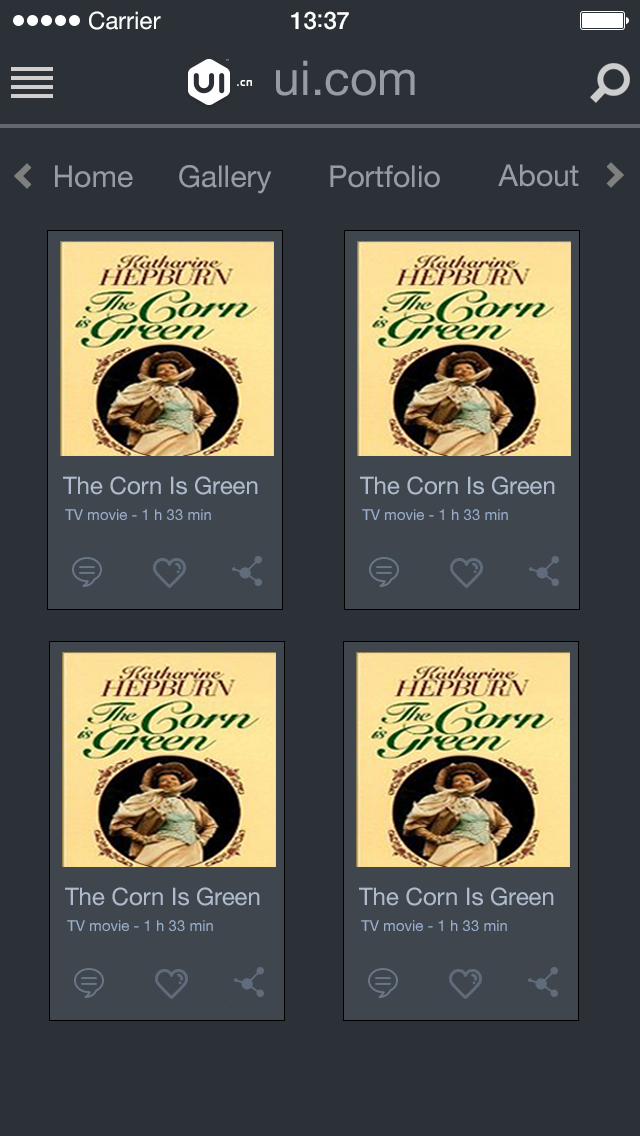
<style>
.page{position:relative;width:640px;height:1136px;background:#2c3137}
.page>*{position:absolute;margin:0}
.t1{font:24px "HelveticaNeue";color:#ffffff}
.t2{font:24px "HelveticaNeue-Medium";color:#ffffff}
.t3{font:48px "HelveticaNeue";color:#969ca4}
.t4{font:30px "HelveticaNeue";color:#969ca4}
.t5{font:24px "HelveticaNeue";color:#aebbcc}
.t6{font:15px "HelveticaNeue";color:#98aecb}
</style>
<div class="page">
<p class="t1" style="left:89px;top:11px;width:72px;height:19px">Carrier</p>
<p class="t2" style="left:291px;top:11px;width:58px;height:19px">13<span class="t1">:</span>37</p>
<p class="t3" style="left:276px;top:60px;width:139px;height:36px">ui.com</p>
<p class="t4" style="left:55px;top:165px;width:78px;height:23px">Home</p>
<p class="t4" style="left:179px;top:165px;width:93px;height:29px">Gallery</p>
<p class="t4" style="left:330px;top:165px;width:110px;height:23px">Portfolio</p>
<p class="t4" style="left:498px;top:164px;width:81px;height:23px">About</p>
<p class="t5" style="left:63px;top:476px;width:195px;height:19px">The Corn Is Green</p>
<p class="t5" style="left:360px;top:476px;width:195px;height:19px">The Corn Is Green</p>
<p class="t6" style="left:65px;top:509px;width:146px;height:11px">TV movie - 1 h 33 min</p>
<p class="t6" style="left:362px;top:509px;width:146px;height:11px">TV movie - 1 h 33 min</p>
<p class="t5" style="left:65px;top:887px;width:195px;height:19px">The Corn Is Green</p>
<p class="t5" style="left:359px;top:887px;width:195px;height:19px">The Corn Is Green</p>
<p class="t6" style="left:67px;top:920px;width:146px;height:11px">TV movie - 1 h 33 min</p>
<p class="t6" style="left:361px;top:920px;width:146px;height:11px">TV movie - 1 h 33 min</p>
</div>
